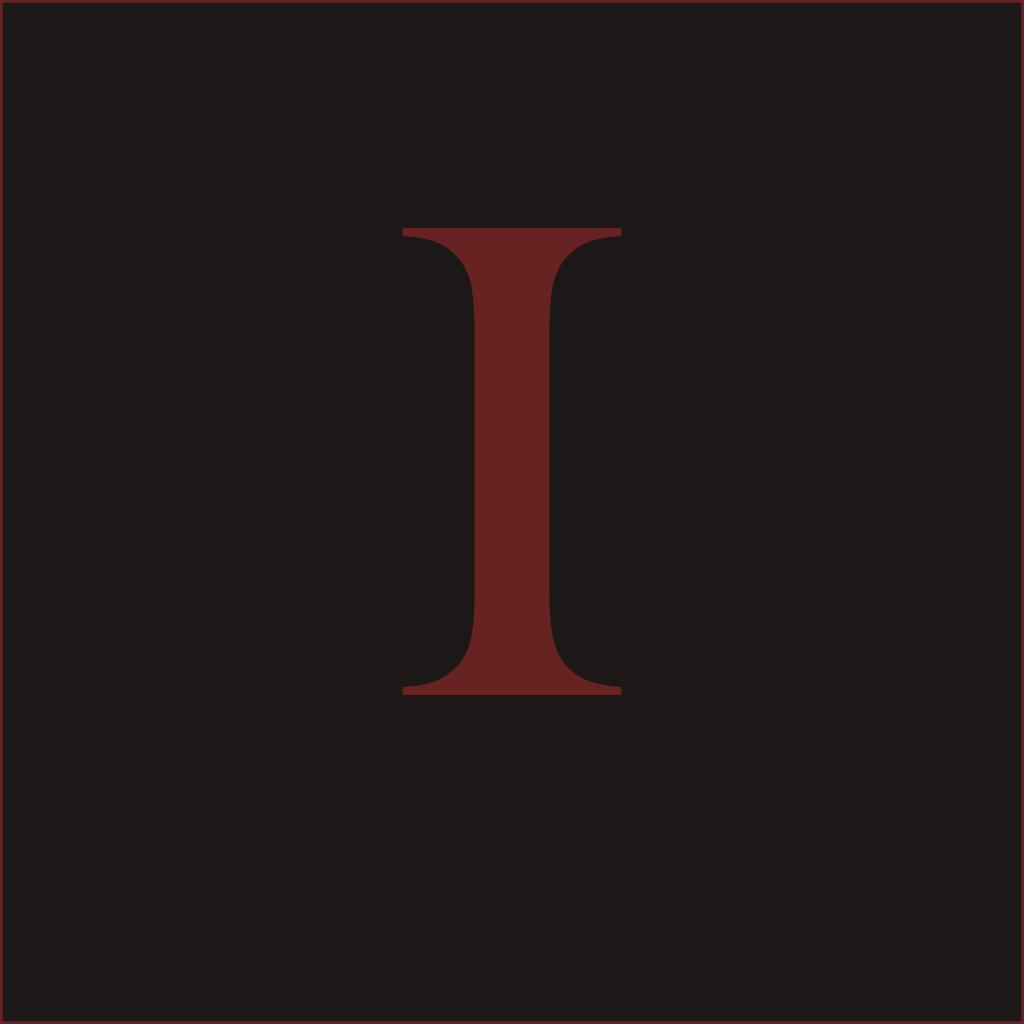
<style>
.page{position:relative;width:1024px;height:1024px;background:#1c1818}
.page>*{position:absolute;margin:0}
.t1{font:700px "BaskOldFace";color:#672222}
</style>
<div class="page">
<p class="t1" style="left:402px;top:227px;width:220px;height:468px">I</p>
</div>
